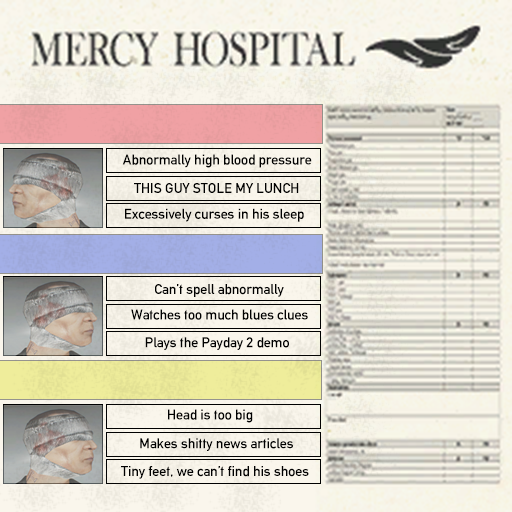
<style>
.page{position:relative;width:512px;height:512px}
.page>*{position:absolute;margin:0}
.t1{font:14px "AlteDIN1451Mittelschrift";color:#000000}
</style>
<div class="page">
<p class="t1" style="left:122px;top:154px;width:190px;height:14px">Abnormally high blood pressure</p>
<p class="t1" style="left:134px;top:183px;width:165px;height:10px">THIS GUY STOLE MY LUNCH</p>
<p class="t1" style="left:125px;top:208px;width:179px;height:14px">Excessively curses in his sleep</p>
<p class="t1" style="left:155px;top:284px;width:129px;height:13px">Can’t spell abnormally</p>
<p class="t1" style="left:131px;top:309px;width:177px;height:11px">Watches too much blues clues</p>
<p class="t1" style="left:145px;top:337px;width:144px;height:13px">Plays the Payday 2 demo</p>
<p class="t1" style="left:168px;top:409px;width:85px;height:14px">Head is too big</p>
<p class="t1" style="left:140px;top:438px;width:153px;height:13px">Makes shitty news articles</p>
<p class="t1" style="left:121px;top:466px;width:188px;height:13px">Tiny feet, we can’t find his shoes</p>
</div>
